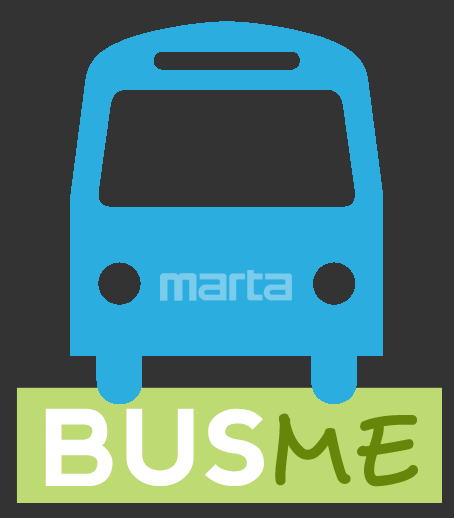
<style>
.page{position:relative;width:454px;height:518px;background:#333333}
.page>*{position:absolute;margin:0}
.t1{font:105.2px "nevis-Bold";color:#ffffff;text-transform:uppercase}
.t2{font:105.2px "Desyrel";color:#658609;text-transform:uppercase}
</style>
<div class="page">
<p class="t1" style="left:45px;top:408px;width:219px;height:78px">bus</p>
<p class="t2" style="left:275px;top:413px;width:143px;height:74px">me</p>
</div>
